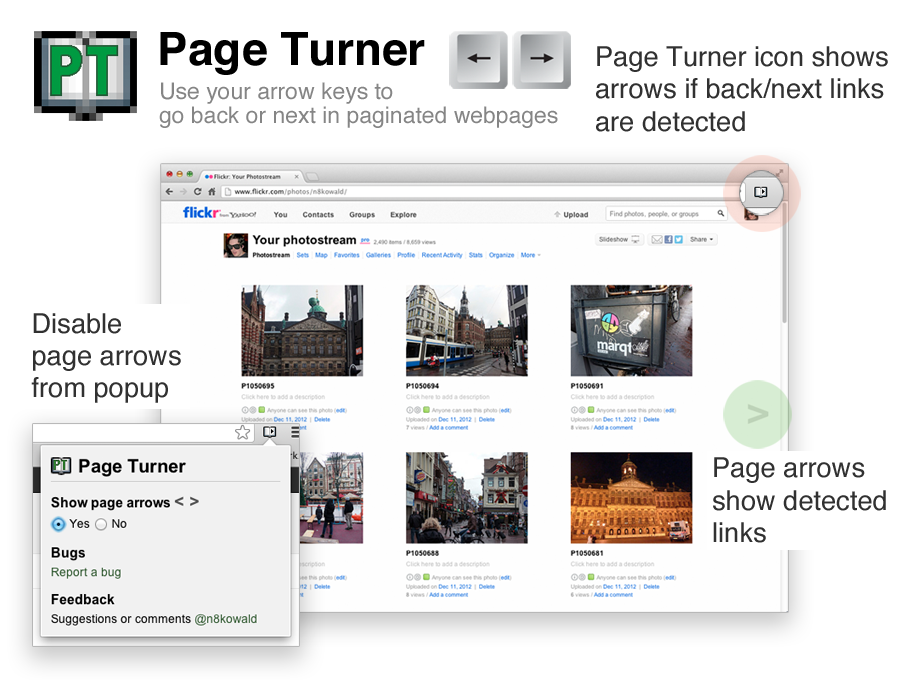
<style>
.page{position:relative;width:920px;height:680px;background:#ffffff}
.page>*{position:absolute;margin:0}
.t1{font:46px "Helvetica-Bold";color:#000000}
.t2{font:27.3px/32.3px "Helvetica";color:#313131}
.t3{font:22.9px/23.8px "Helvetica";color:#858585}
</style>
<div class="page">
<p class="t1" style="left:160px;top:32px;width:265px;height:43px">Page Turner</p>
<p class="t2" style="left:596px;top:46px;width:292px;height:86px">Page Turner icon shows <br>arrows if back/next links <br>are detected</p>
<p class="t3" style="left:159px;top:82px;width:399px;height:46px">Use your arrow keys to <br>go back or next in paginated webpages</p>
<p class="t2" style="left:31px;top:313px;width:150px;height:90px">Disable <br>page arrows<br>from popup</p>
<p class="t2" style="left:713px;top:457px;width:173px;height:86px">Page arrows<br>show detected <br>links</p>
</div>
